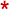
<style>
.page{position:relative;width:9px;height:10px;background:#ffffff}
.page>*{position:absolute;margin:0}
.t1{font:28px "ArialMT";letter-spacing:0.025em;color:#cc0000;scale:0.9 1}
</style>
<div class="page">
<p class="t1" style="left:0px;top:0px;width:9px;height:10px">*</p>
</div>
